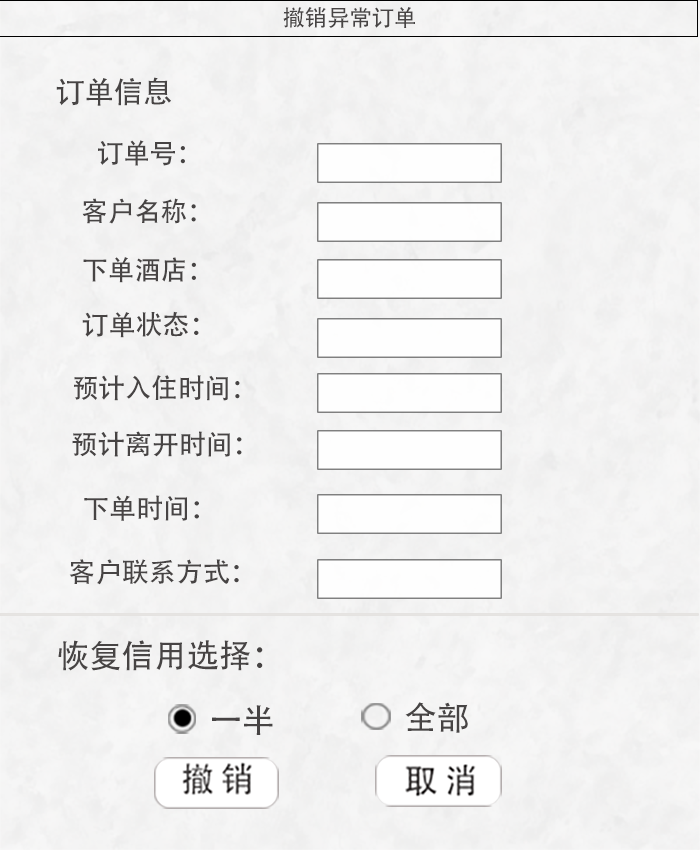
<style>
.page{position:relative;width:700px;height:850px}
.page>*{position:absolute;margin:0}
.t1{font:22.7px "AdobeHeitiStd-Regular";letter-spacing:-0.005em;color:#474444;text-transform:uppercase}
.t2{font:29.7px "AdobeHeitiStd-Regular";letter-spacing:-0.005em;color:#474444;text-transform:uppercase}
.t3{font:26.9px "AdobeHeitiStd-Regular";letter-spacing:-0.005em;color:#474444;text-transform:uppercase}
.t4{font:32.5px "AdobeHeitiStd-Regular";letter-spacing:-0.005em;color:#474444;text-transform:uppercase}
</style>
<div class="page">
<p class="t1" style="left:283px;top:7px;width:132px;height:21px">撤销异常订单</p>
<p class="t2" style="left:56px;top:77px;width:115px;height:29px">订单信息</p>
<p class="t3" style="left:98px;top:140px;width:87px;height:26px">订单号：</p>
<p class="t3" style="left:82px;top:198px;width:114px;height:26px">客户名称：</p>
<p class="t3" style="left:83px;top:257px;width:113px;height:26px">下单酒店：</p>
<p class="t3" style="left:82px;top:311px;width:117px;height:27px">订单状态：</p>
<p class="t3" style="left:74px;top:375px;width:166px;height:26px">预计入住时间：</p>
<p class="t3" style="left:72px;top:431px;width:170px;height:26px">预计离开时间：</p>
<p class="t3" style="left:84px;top:495px;width:115px;height:26px">下单时间：</p>
<p class="t3" style="left:69px;top:559px;width:170px;height:26px">客户联系方式：</p>
<p class="t4" style="left:58px;top:640px;width:205px;height:31px">恢复信用选择：</p>
<p class="t4" style="left:405px;top:702px;width:63px;height:31px">全部</p>
<p class="t4" style="left:212px;top:705px;width:61px;height:30px">一半</p>
</div>
